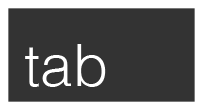
<style>
.page{position:relative;width:203px;height:110px;background:#333333}
.page>*{position:absolute;margin:0}
.t1{font:58.3px "Helvetica-Light";color:#ffffff}
</style>
<div class="page">
<p class="t1" style="left:25px;top:44px;width:81px;height:43px">tab</p>
</div>
